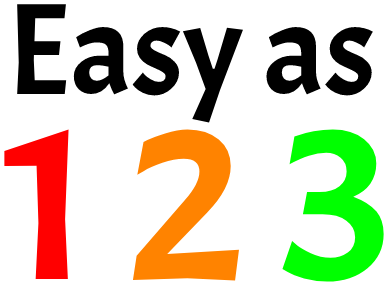
<style>
.page{position:relative;width:390px;height:292px;background:#ffffff}
.page>*{position:absolute;margin:0}
.t1{font:130px "Acme-Regular";color:#000000}
.t2{font:230px "Acme-Regular";color:#ff0000}
.t3{font:230px "Acme-Regular";color:#ff8300}
.t4{font:230px "Acme-Regular";color:#00ff00}
</style>
<div class="page">
<p class="t1" style="left:17px;top:4px;width:356px;height:119px">Easy as</p>
<p class="t2" style="left:4px;top:129px;width:380px;height:153px">1 <span class="t3">2 </span><span class="t4">3</span></p>
</div>
